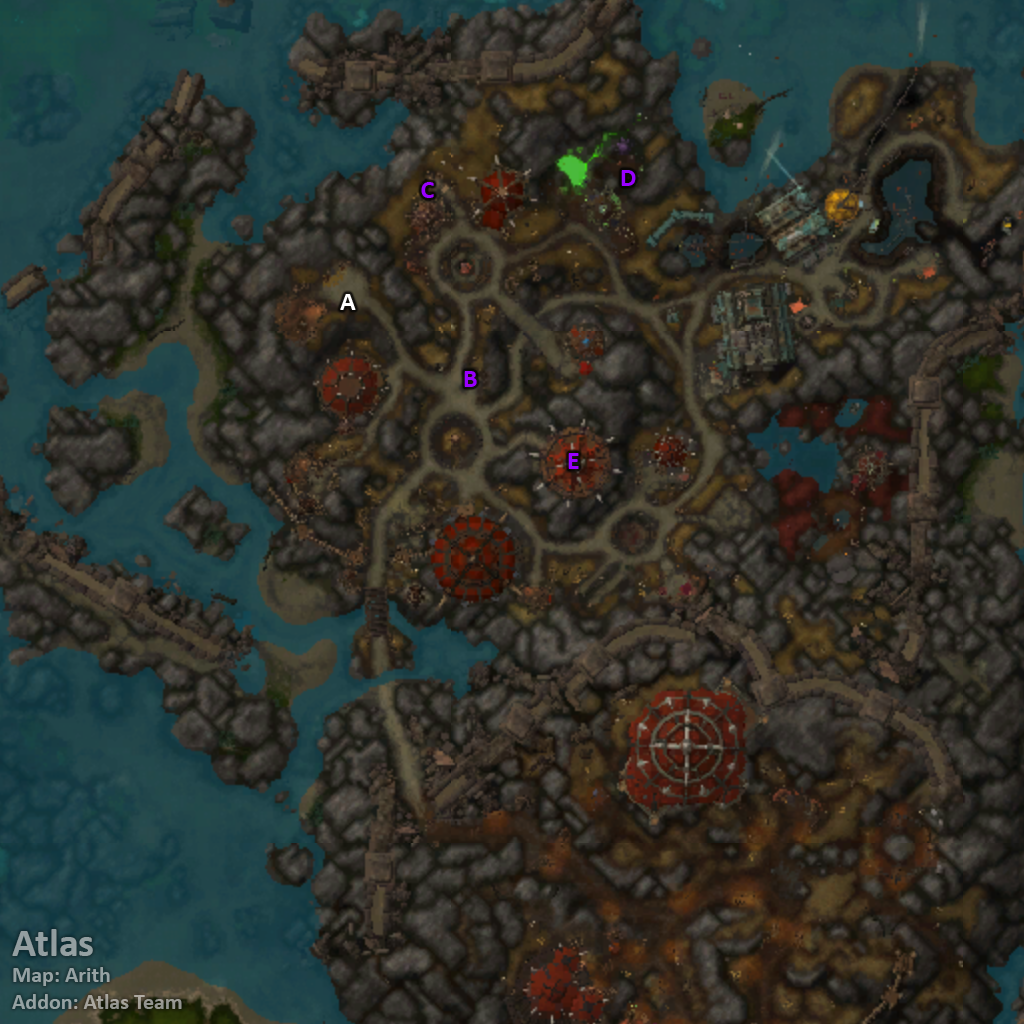
<style>
.page{position:relative;width:1024px;height:1024px}
.page>*{position:absolute;margin:0}
.t1{font:26px "Calibri-Bold";color:#9900ff}
.t2{font:26px "Calibri-Bold";color:#ffffff}
.t3{font:22px "Calibri-Bold";color:#95a0a2}
.t4{font:40px "Calibri-Bold";color:#95a0a2}
</style>
<div class="page">
<p class="t1" style="left:621px;top:170px;width:15px;height:16px">D</p>
<p class="t1" style="left:421px;top:182px;width:13px;height:16px">C</p>
<p class="t2" style="left:340px;top:294px;width:16px;height:16px">A</p>
<p class="t1" style="left:464px;top:371px;width:13px;height:16px">B</p>
<p class="t1" style="left:568px;top:453px;width:11px;height:16px">E</p>
<p class="t3" style="left:12px;top:929px;width:170px;height:80px"><span class="t4">Atlas<br></span>Map: Arith<br>Addon: Atlas Team</p>
</div>
